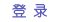
<style>
.page{position:relative;width:60px;height:22px;background:#ffffff}
.page>*{position:absolute;margin:0}
.t1{font:14px "FZY1JW--GB1-0";letter-spacing:0.1em;color:#5b5bbd;font-weight:bold}
</style>
<div class="page">
<p class="t1" style="left:12px;top:4px;width:35px;height:14px">登 录</p>
</div>
